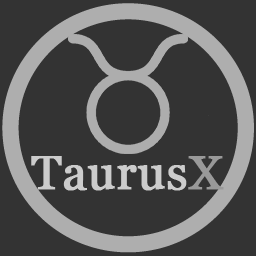
<style>
.page{position:relative;width:256px;height:256px;background:#333333}
.page>*{position:absolute;margin:0}
.t1{font:48px "Georgia";color:#cccccc;font-weight:bold}
.t2{font:48px "Georgia";color:#999999;font-weight:bold}
</style>
<div class="page">
<p class="t1" style="left:31px;top:156px;width:193px;height:35px">Taurus<span class="t2">X</span></p>
</div>
